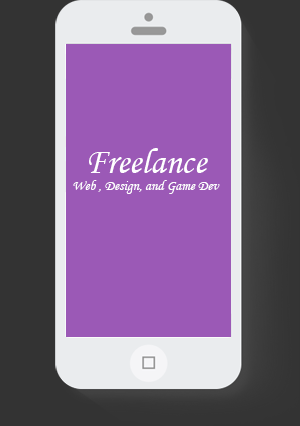
<style>
.page{position:relative;width:300px;height:426px;background:#9b59b6}
.page>*{position:absolute;margin:0}
.t1{font:14px "MonotypeCorsiva";color:#ffffff}
.t2{font:36px "MonotypeCorsiva";color:#ffffff}
</style>
<div class="page">
<p class="t1" style="left:73px;top:148px;width:147px;height:46px;text-align:center"><span class="t2">Freelance<br></span>Web , Design, and Game Dev</p>
</div>
